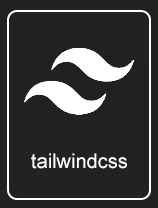
<style>
.page{position:relative;width:158px;height:208px;background:#222222}
.page>*{position:absolute;margin:0}
.t1{font:20px "ArialMT";color:#ffffff}
</style>
<div class="page">
<p class="t1" style="left:31px;top:153px;width:96px;height:16px">tailwindcss</p>
</div>
